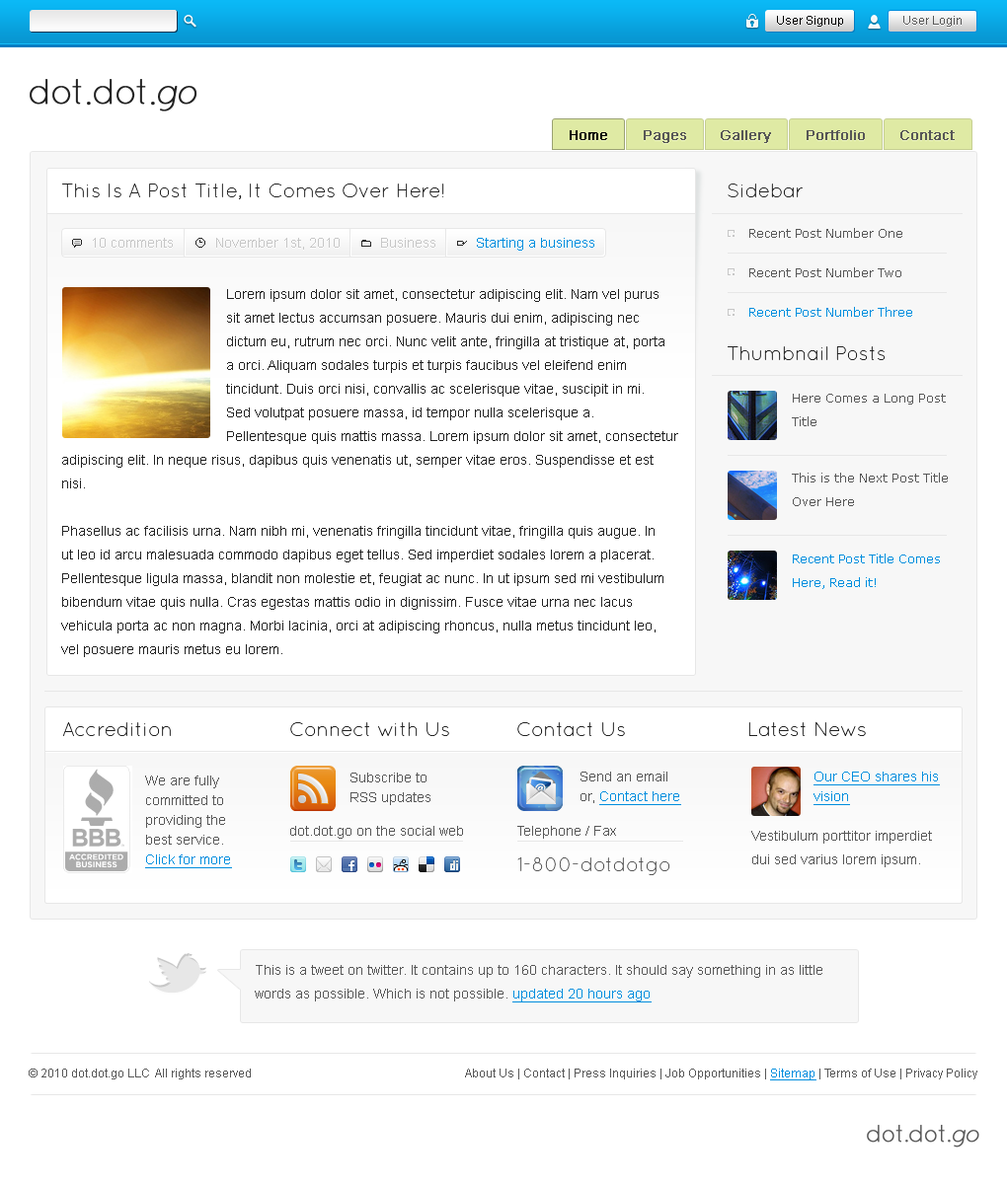
<style>
.page{position:relative;width:1007px;height:1184px;background:#ffffff}
.page>*{position:absolute;margin:0}
.t1{font:11.8px "ArialMT"}
.t2{font:11.8px "ArialMT";color:#000000}
.t3{font:11.8px "ArialMT";color:#575757}
.t4{font:35.5px "QuicksandLight-Regular";letter-spacing:-0.05em;color:#222222;font-weight:bold}
.t5{font:35.5px "QuicksandLightOblique-Regular";letter-spacing:-0.05em;color:#222222;font-weight:bold}
.t6{font:13.8px "ArialMT";color:#000000;font-weight:bold}
.t7{font:13.8px "ArialMT";font-weight:bold}
.t8{font:13.8px "ArialMT";color:#575757;font-weight:bold}
.t9{font:19.7px "QuicksandLight-Regular";color:#222222}
.t10{font:11.8px "Verdana";color:#575757}
.t11{font:13.8px "ArialMT";color:#c7c7c7}
.t12{font:13.8px "ArialMT";color:#018ede}
.t13{font:13.8px/23.7px "ArialMT";color:#222222}
.t14{font:11.8px "Verdana";color:#018ede}
.t15{font:11.8px/23.7px "Verdana";color:#575757}
.t16{font:11.8px/23.7px "Verdana";color:#018ede}
.t17{font:13.8px/19.7px "ArialMT";color:#575757}
.t18{font:13.8px/19.7px "ArialMT";color:#018ede;text-decoration:underline}
.t19{font:13.8px "ArialMT";color:#575757}
.t20{font:13.8px/23.7px "ArialMT";color:#575757}
.t21{font:19.7px "QuicksandLight-Regular";color:#575757}
.t22{font:13.8px/23.7px "ArialMT";color:#018ede;text-decoration:underline}
.t23{font:11.8px "ArialMT";color:#018ede;text-decoration:underline}
.t24{font:23.7px "QuicksandLight-Regular";letter-spacing:-0.05em;color:#575757;font-weight:bold}
.t25{font:23.7px "QuicksandLightOblique-Regular";letter-spacing:-0.05em;color:#575757;font-weight:bold}
</style>
<div class="page">
<p class="t1" style="left:777px;top:17px;width:66px;height:11px">User Signup</p>
<p class="t2" style="left:777px;top:16px;width:66px;height:11px">User Signup</p>
<p class="t3" style="left:903px;top:16px;width:58px;height:11px">User Login</p>
<p class="t4" style="left:30px;top:79px;width:167px;height:33px">dot.dot.<span class="t5">go</span></p>
<p class="t6" style="left:570px;top:131px;width:37px;height:10px">Home</p>
<p class="t6" style="left:570px;top:130px;width:37px;height:10px">Home</p>
<p class="t7" style="left:644px;top:131px;width:42px;height:13px">Pages</p>
<p class="t8" style="left:644px;top:130px;width:42px;height:13px">Pages</p>
<p class="t7" style="left:721px;top:131px;width:50px;height:13px">Gallery</p>
<p class="t8" style="left:721px;top:130px;width:50px;height:13px">Gallery</p>
<p class="t8" style="left:806px;top:131px;width:59px;height:10px">Portfolio</p>
<p class="t8" style="left:806px;top:130px;width:59px;height:10px">Portfolio</p>
<p class="t7" style="left:900px;top:131px;width:54px;height:10px">Contact</p>
<p class="t8" style="left:900px;top:130px;width:54px;height:10px">Contact</p>
<p class="t9" style="left:62px;top:184px;width:382px;height:15px">This Is A Post Title, It Comes Over Here!</p>
<p class="t9" style="left:727px;top:184px;width:75px;height:13px">Sidebar</p>
<p class="t10" style="left:749px;top:228px;width:153px;height:10px">Recent Post Number One</p>
<p class="t11" style="left:93px;top:238px;width:80px;height:10px">10 comments</p>
<p class="t11" style="left:216px;top:238px;width:124px;height:12px">November 1st, 2010</p>
<p class="t11" style="left:381px;top:238px;width:54px;height:10px">Business</p>
<p class="t12" style="left:477px;top:238px;width:117px;height:13px">Starting a business</p>
<p class="t10" style="left:749px;top:267px;width:152px;height:10px">Recent Post Number Two</p>
<p class="t13" style="left:226px;top:289px;width:452px;height:155px">Lorem ipsum dolor sit amet, consectetur adipiscing elit. Nam vel purus<br>sit amet lectus accumsan posuere. Mauris dui enim, adipiscing nec<br>dictum eu, rutrum nec orci. Nunc velit ante, fringilla at tristique at, porta<br>a orci. Aliquam sodales turpis et turpis faucibus vel eleifend enim<br>tincidunt. Duis orci nisi, convallis ac scelerisque vitae, suscipit in mi.<br>Sed volutpat posuere massa, id tempor nulla scelerisque a.<br>Pellentesque quis mattis massa. Lorem ipsum dolor sit amet, consectetur</p>
<p class="t14" style="left:749px;top:307px;width:163px;height:10px">Recent Post Number Three</p>
<p class="t9" style="left:727px;top:346px;width:158px;height:14px">Thumbnail Posts</p>
<p class="t15" style="left:792px;top:394px;width:154px;height:32px">Here Comes a Long Post<br>Title</p>
<p class="t13" style="left:61px;top:455px;width:602px;height:202px">adipiscing elit. In neque risus, dapibus quis venenatis ut, semper vitae eros. Suspendisse et est<br>nisi.<br><br>Phasellus ac facilisis urna. Nam nibh mi, venenatis fringilla tincidunt vitae, fringilla quis augue. In<br>ut leo id arcu malesuada commodo dapibus eget tellus. Sed imperdiet sodales lorem a placerat.<br>Pellentesque ligula massa, blandit non molestie et, feugiat ac nunc. In ut ipsum sed mi vestibulum<br>bibendum vitae quis nulla. Cras egestas mattis odio in dignissim. Fusce vitae urna nec lacus<br>vehicula porta ac non magna. Morbi lacinia, orci at adipiscing rhoncus, nulla metus tincidunt leo,<br>vel posuere mauris metus eu lorem.</p>
<p class="t15" style="left:792px;top:473px;width:156px;height:33px">This is the Next Post Title<br>Over Here</p>
<p class="t16" style="left:793px;top:554px;width:147px;height:35px">Recent Post Title Comes<br>Here, Read it!</p>
<p class="t9" style="left:63px;top:722px;width:108px;height:14px">Accredition</p>
<p class="t9" style="left:290px;top:722px;width:159px;height:14px">Connect with Us</p>
<p class="t9" style="left:517px;top:722px;width:108px;height:14px">Contact Us</p>
<p class="t9" style="left:748px;top:722px;width:118px;height:14px">Latest News</p>
<p class="t17" style="left:350px;top:773px;width:80px;height:32px">Subscribe to<br>RSS updates</p>
<p class="t17" style="left:580px;top:772px;width:101px;height:33px">Send an email<br>or, <span class="t18">Contact here</span></p>
<p class="t18" style="left:813px;top:772px;width:127px;height:33px">Our CEO shares his<br>vision</p>
<p class="t17" style="left:145px;top:776px;width:87px;height:93px">We are fully<br>committed to<br>providing the<br>best service.<br><span class="t18">Click for more</span></p>
<p class="t19" style="left:290px;top:826px;width:173px;height:13px">dot.dot.go on the social web</p>
<p class="t19" style="left:517px;top:826px;width:99px;height:13px">Telephone / Fax</p>
<p class="t20" style="left:751px;top:831px;width:181px;height:37px">Vestibulum porttitor imperdiet<br>dui sed varius lorem ipsum.</p>
<p class="t21" style="left:517px;top:858px;width:153px;height:17px">1-800-dotdotgo</p>
<p class="t20" style="left:255px;top:965px;width:567px;height:38px">This is a tweet on twitter. It contains up to 160 characters. It should say something in as little<br>words as possible. Which is not possible. <span class="t22">updated 20 hours ago</span></p>
<p class="t3" style="left:29px;top:1069px;width:222px;height:11px">© 2010 dot.dot.go LLC  All rights reserved</p>
<p class="t3" style="left:465px;top:1069px;width:512px;height:12px">About Us | Contact | Press Inquiries | Job Opportunities | <span class="t23">Sitemap</span> | Terms of Use | Privacy Policy</p>
<p class="t24" style="left:867px;top:1125px;width:112px;height:23px">dot.dot.<span class="t25">go</span></p>
</div>
